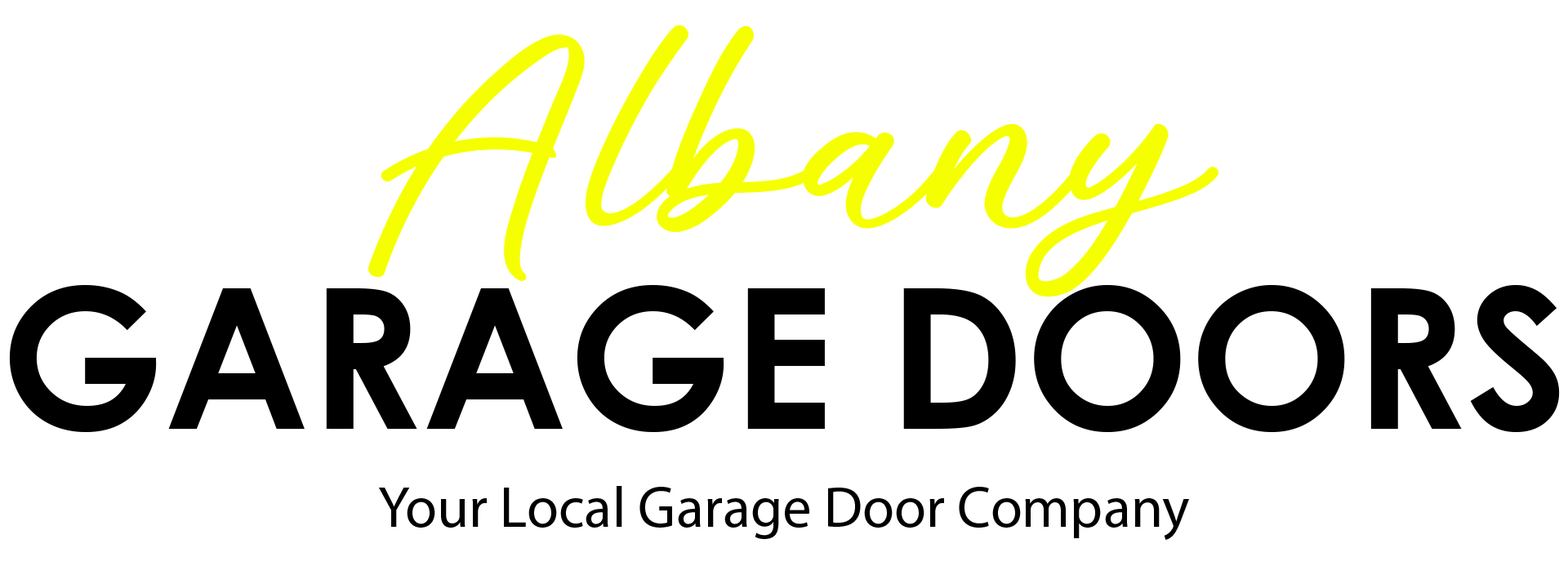
<style>
.page{position:relative;width:1568px;height:566px;background:#ffffff}
.page>*{position:absolute;margin:0}
.t1{font:195.6px "CenturyGothic-Bold";color:#000000}
.t2{font:195.6px "AlishaFreeRegular";color:#f6ff00}
.t3{font:57.8px "MyriadPro-Regular";color:#000000}
</style>
<div class="page">
<p class="t1" style="left:9px;top:24px;width:1551px;height:408px;text-align:center"><span class="t2">Albany<br></span>GARAGE DOORS</p>
<p class="t3" style="left:379px;top:486px;width:810px;height:54px">Your Local Garage Door Company</p>
</div>
